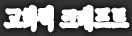
<style>
.page{position:relative;width:132px;height:36px;background:#ffffff}
.page>*{position:absolute;margin:0}
.t1{font:24px "H2mjrE";letter-spacing:-0.03em;color:#ffffff;font-weight:bold;scale:0.7 1}
</style>
<div class="page">
<p class="t1" style="left:5px;top:6px;width:123px;height:25px">고화력 크래프트</p>
</div>
